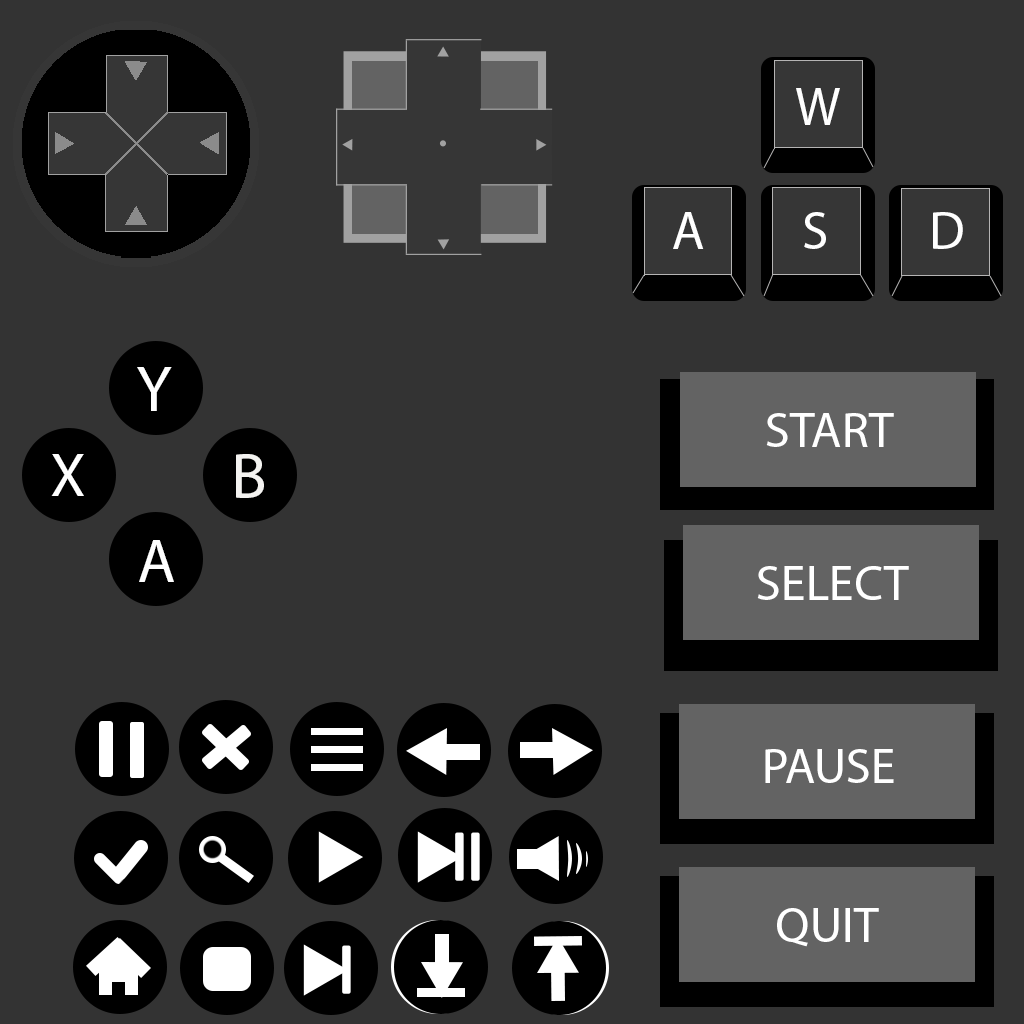
<style>
.page{position:relative;width:1024px;height:1024px;background:#333333}
.page>*{position:absolute;margin:0}
.t1{font:53.6px "MyriadPro-Regular";color:#ffffff}
.t2{font:65.4px "MyriadPro-Regular";color:#ffffff}
.t3{font:50px "MyriadPro-Regular";color:#ffffff}
.t4{font:61.9px "MyriadPro-Regular";color:#ffffff}
.t5{font:65.4px "MyriadPro-Regular";color:#f4f3f1}
</style>
<div class="page">
<p class="t1" style="left:796px;top:88px;width:44px;height:37px">W</p>
<p class="t1" style="left:673px;top:212px;width:31px;height:37px">A</p>
<p class="t1" style="left:804px;top:212px;width:22px;height:37px">S</p>
<p class="t1" style="left:933px;top:212px;width:30px;height:37px">D</p>
<p class="t2" style="left:137px;top:367px;width:35px;height:44px">Y</p>
<p class="t3" style="left:766px;top:413px;width:128px;height:34px">START</p>
<p class="t4" style="left:51px;top:454px;width:33px;height:42px">X</p>
<p class="t5" style="left:236px;top:454px;width:28px;height:44px">B</p>
<p class="t4" style="left:139px;top:540px;width:35px;height:42px">A</p>
<p class="t3" style="left:757px;top:566px;width:152px;height:34px">SELECT</p>
<p class="t3" style="left:765px;top:749px;width:129px;height:34px">PAUSE</p>
<p class="t3" style="left:777px;top:908px;width:102px;height:39px">QUIT</p>
</div>
